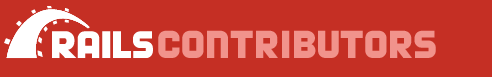
<style>
.page{position:relative;width:492px;height:77px;background:#c52f24}
.page>*{position:absolute;margin:0}
.t1{font:45.5px "BorgstrandPro";letter-spacing:-0.06em;color:#f1938c}
</style>
<div class="page">
<p class="t1" style="left:158px;top:30px;width:278px;height:28px">Contributors</p>
</div>
